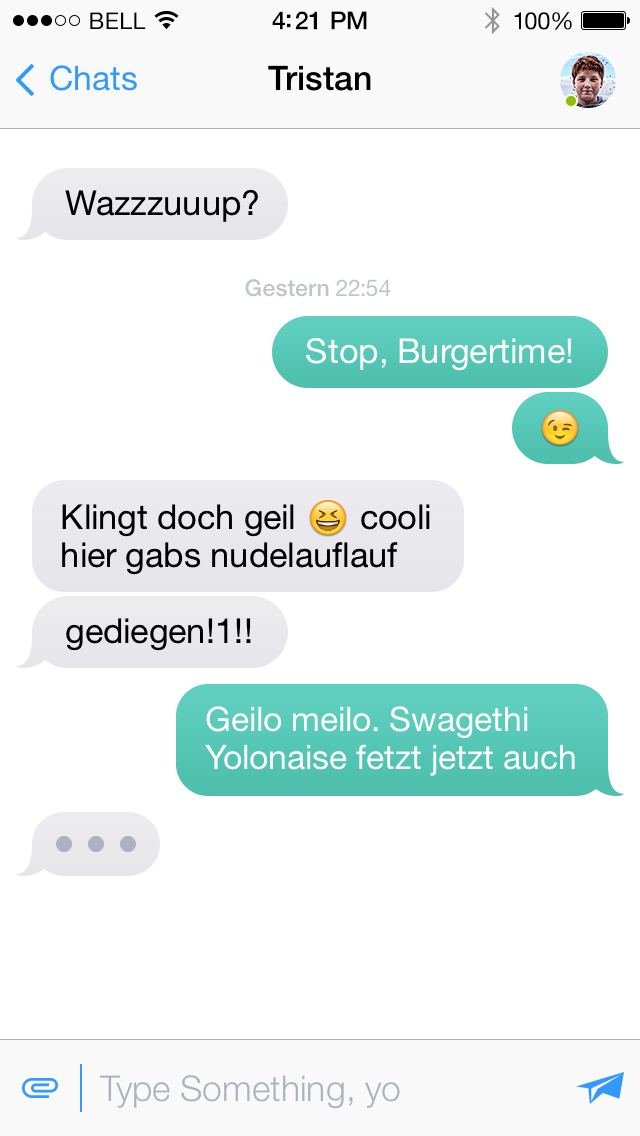
<style>
.page{position:relative;width:640px;height:1136px;background:#ffffff}
.page>*{position:absolute;margin:0}
.t1{font:23px "HelveticaNeue";letter-spacing:0.02em;color:#000000}
.t2{font:25px "HelveticaNeue-Medium";letter-spacing:-0.02em;color:#000000}
.t3{font:24px "HelveticaNeue";letter-spacing:-0.02em;color:#000000}
.t4{font:33.8px "HelveticaNeue";color:#3399ff}
.t5{font:33.8px "HelveticaNeue-Medium";color:#000000}
.t6{font:34.4px "HelveticaNeue";color:#000000}
.t7{font:23.1px "HelveticaNeue-Medium";color:#c0c4cc}
.t8{font:23.1px "HelveticaNeue";color:#c0c4cc}
.t9{font:34.4px "HelveticaNeue";color:#ffffff}
.t10{font:34.4px/38px "HelveticaNeue";color:#000000}
.t11{font:33.8px/37.3px "HelveticaNeue";color:#ffffff}
.t12{font:35.6px "HelveticaNeue-Light";color:#acb2bf}
</style>
<div class="page">
<p class="t1" style="left:90px;top:12px;width:56px;height:17px">BELL</p>
<p class="t2" style="left:272px;top:11px;width:95px;height:19px">4:21 PM</p>
<p class="t3" style="left:514px;top:12px;width:58px;height:18px">100%</p>
<p class="t4" style="left:50px;top:65px;width:87px;height:26px">Chats</p>
<p class="t5" style="left:268px;top:65px;width:103px;height:26px">Tristan</p>
<p class="t6" style="left:65px;top:189px;width:193px;height:33px">Wazzzuuup?</p>
<p class="t7" style="left:245px;top:279px;width:146px;height:18px">Gestern <span class="t8">22:54</span></p>
<p class="t9" style="left:306px;top:337px;width:266px;height:34px">Stop, Burgertime!</p>
<p class="t10" style="left:62px;top:504px;width:368px;height:71px">Klingt doch geil       cooli<br>hier gabs nudelauflauf</p>
<p class="t6" style="left:66px;top:618px;width:185px;height:33px">gediegen!1!!</p>
<p class="t11" style="left:205px;top:706px;width:370px;height:70px">Geilo meilo. Swagethi<br>Yolonaise fetzt jetzt auch</p>
<p class="t12" style="left:99px;top:1075px;width:301px;height:34px">Type Something, yo</p>
</div>
